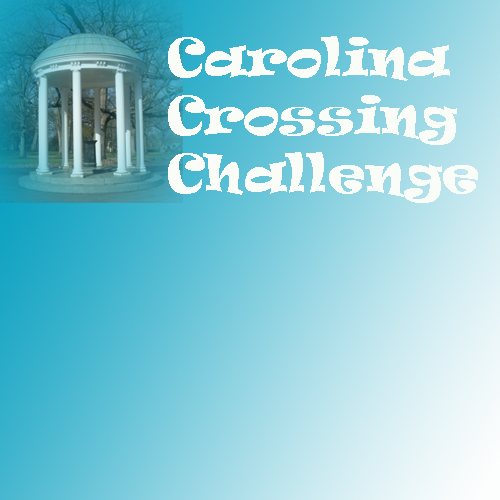
<style>
.page{position:relative;width:500px;height:500px}
.page>*{position:absolute;margin:0}
.t1{font:48px "Ravie";color:#fafcf8;scale:1.06 1}
</style>
<div class="page">
<p class="t1" style="left:168px;top:36px;width:310px;height:167px">Carolina<br>Crossing <br>Challenge</p>
</div>
